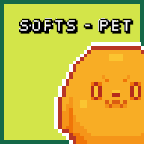
<style>
.page{position:relative;width:144px;height:144px;background:#d3e549}
.page>*{position:absolute;margin:0}
.t1{font:12px "Fipps-Regular";color:#000000;text-transform:uppercase}
</style>
<div class="page">
<p class="t1" style="left:19px;top:18px;width:115px;height:16px">SOFTS - PET</p>
</div>
